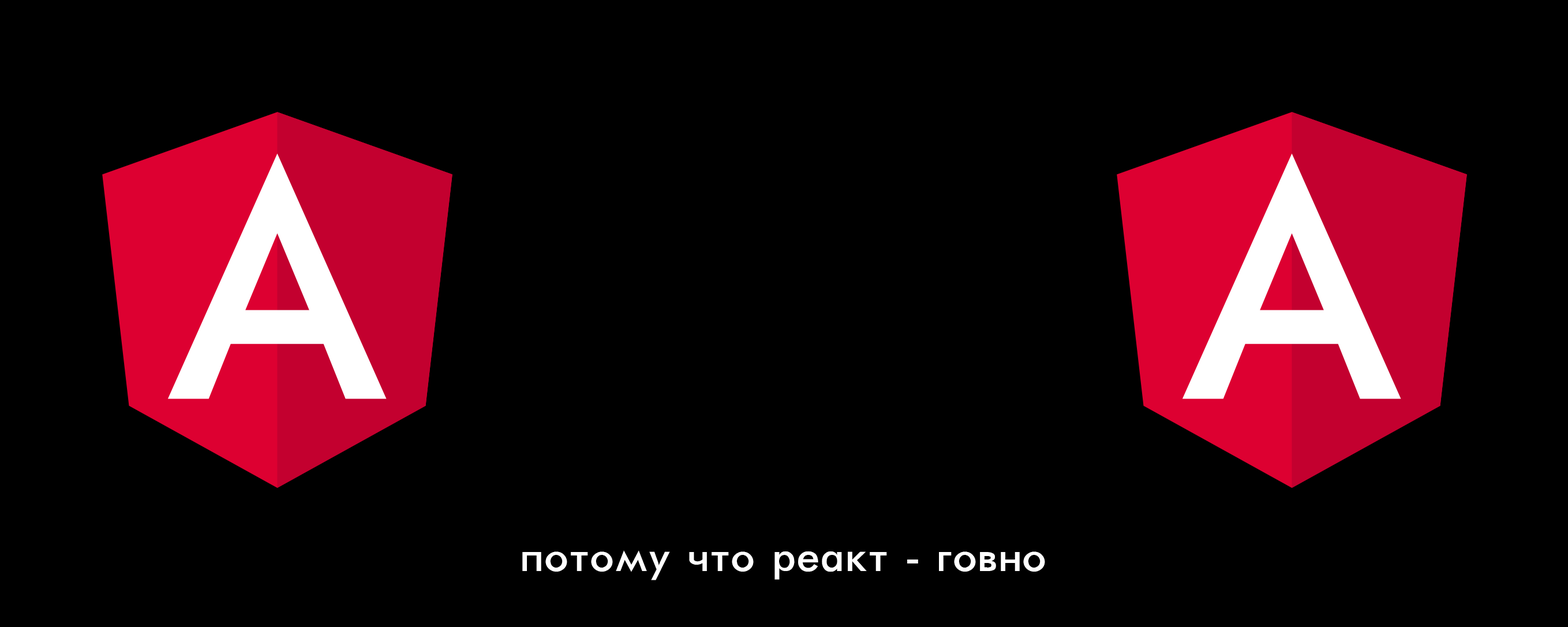
<style>
.page{position:relative;width:1568px;height:627px;background:#000000}
.page>*{position:absolute;margin:0}
.t1{font:48.1px "Futura-Normal";color:#ffffff}
</style>
<div class="page">
<p class="t1" style="left:522px;top:551px;width:523px;height:30px">потому что реакт - говно</p>
</div>
